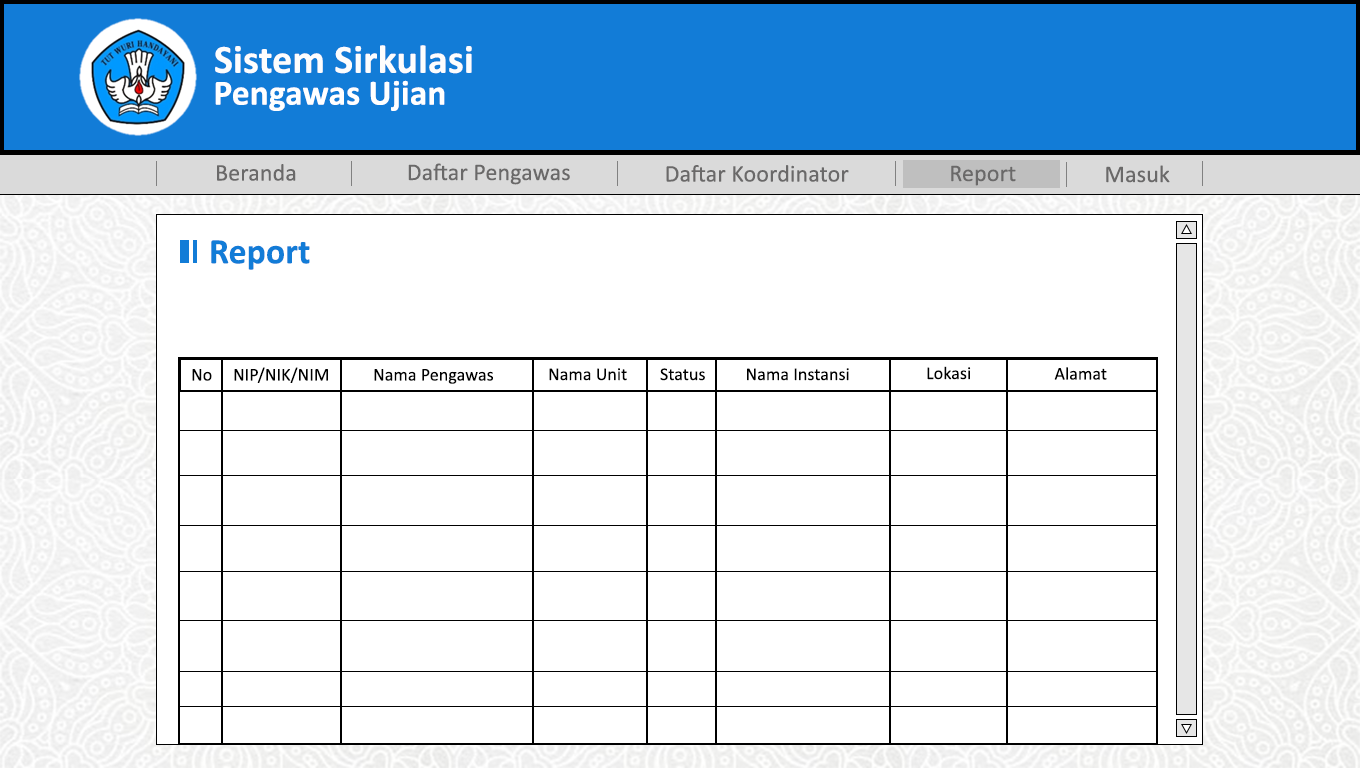
<style>
.page{position:relative;width:1360px;height:768px;background:#ffffff}
.page>*{position:absolute;margin:0}
.t1{font:40.1px "Calibri-Bold";letter-spacing:0.005em;color:#fdfdfd}
.t2{font:35.6px "Calibri-Bold";letter-spacing:0.005em;color:#fffefe}
.t3{font:24px "Calibri";letter-spacing:0.005em;color:#6a6969}
.t4{font:36px "Calibri-Bold";letter-spacing:0.005em;color:#127cd7}
.t5{font:18px "Calibri";letter-spacing:0.005em;color:#000000}
</style>
<div class="page">
<p class="t1" style="left:215px;top:45px;width:257px;height:29px">Sistem Sirkulasi</p>
<p class="t2" style="left:215px;top:80px;width:230px;height:31px">Pengawas Ujian</p>
<p class="t3" style="left:217px;top:164px;width:79px;height:17px">Beranda</p>
<p class="t3" style="left:408px;top:163px;width:162px;height:22px">Daftar Pengawas</p>
<p class="t3" style="left:666px;top:165px;width:183px;height:17px">Daftar Koordinator</p>
<p class="t3" style="left:951px;top:165px;width:65px;height:21px">Report</p>
<p class="t3" style="left:1106px;top:165px;width:64px;height:18px">Masuk</p>
<p class="t4" style="left:211px;top:240px;width:99px;height:30px">Report</p>
<p class="t5" style="left:927px;top:366px;width:44px;height:14px">Lokasi</p>
<p class="t5" style="left:192px;top:369px;width:20px;height:12px">No</p>
<p class="t5" style="left:234px;top:367px;width:94px;height:16px">NIP/NIK/NIM</p>
<p class="t5" style="left:374px;top:369px;width:119px;height:15px">Nama Pengawas</p>
<p class="t5" style="left:549px;top:368px;width:78px;height:13px">Nama Unit</p>
<p class="t5" style="left:660px;top:368px;width:45px;height:13px">Status</p>
<p class="t5" style="left:747px;top:368px;width:102px;height:13px">Nama Instansi</p>
<p class="t5" style="left:1054px;top:367px;width:53px;height:13px">Alamat</p>
</div>
